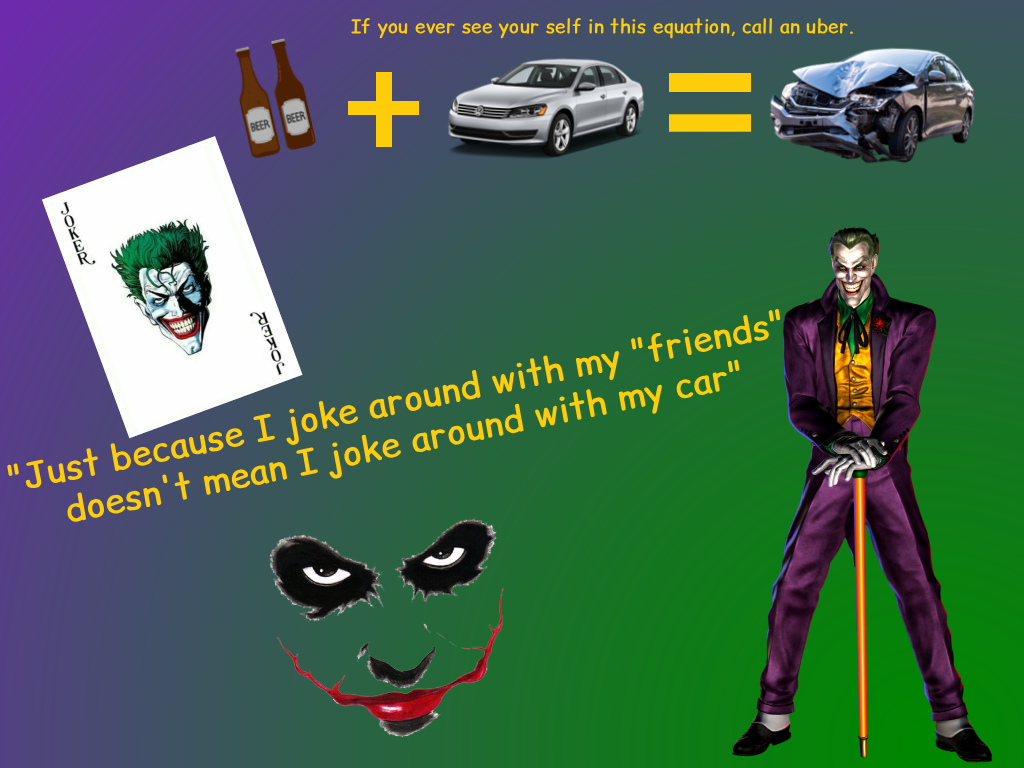
<style>
.page{position:relative;width:1024px;height:768px}
.page>*{position:absolute;margin:0}
.t1{font:18.8px "ComicRelief";color:#fdcd0a;font-weight:bold}
.t2{font:34.6px "ComicRelief";color:#fdcd0a;font-weight:bold}
</style>
<div class="page">
<p class="t1" style="left:351px;top:18px;width:502px;height:21px">If you ever see your self in this equation, call an uber.</p>
<p class="t2" style="left:7px;top:309px;width:774px;height:213px;text-align:center;rotate:-11deg">"Just because I joke around with my "friends"<br>doesn't mean I joke around with my car"</p>
</div>
